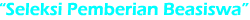
<style>
.page{position:relative;width:250px;height:20px;background:#ffffff}
.page>*{position:absolute;margin:0}
.t1{font:18px "ErasITC-Demi";color:#00ffff}
</style>
<div class="page">
<p class="t1" style="left:0px;top:2px;width:249px;height:14px">“Seleksi Pemberian Beasiswa”</p>
</div>
